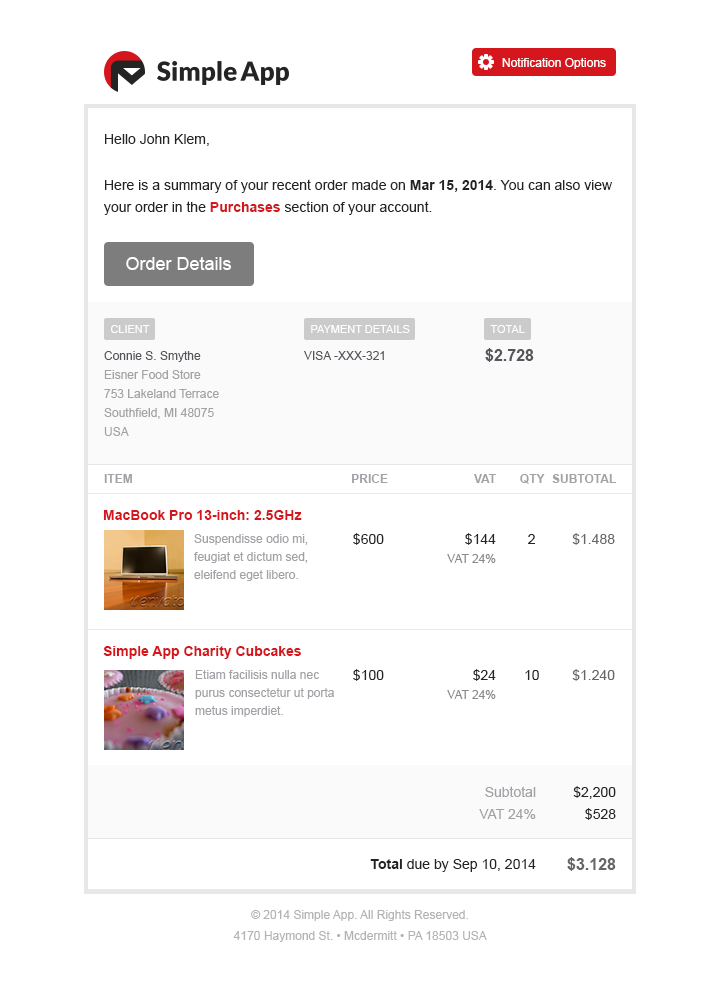
<style>
.page{position:relative;width:720px;height:989px;background:#ffffff}
.page>*{position:absolute;margin:0}
.t1{font:12px "ArialMT";color:#ffffff}
.t2{font:14px/22px "ArialMT";color:#242424}
.t3{font:14px/22px "Arial-BoldMT";color:#242424}
.t4{font:14px/22px "Arial-BoldMT";color:#d5171d}
.t5{font:18px "ArialMT";color:#ffffff}
.t6{font:11px "ArialMT";color:#ffffff;text-transform:uppercase}
.t7{font:12px/19px "ArialMT";color:#a1a2a5}
.t8{font:12px/19px "ArialMT";color:#54565c}
.t9{font:12px "ArialMT";color:#54565c}
.t10{font:16px "Arial-BoldMT";color:#54565c}
.t11{font:12px "Arial-BoldMT";color:#a1a2a5;text-transform:uppercase}
.t12{font:14px "Arial-BoldMT";color:#d5171d}
.t13{font:12px/18px "ArialMT";color:#a1a2a5}
.t14{font:14px "ArialMT";color:#242424}
.t15{font:12px/19px "ArialMT";color:#898989}
.t16{font:14px/19px "ArialMT";color:#242424}
.t17{font:14px "ArialMT";color:#666666}
.t18{font:14px/22px "ArialMT";color:#a1a2a5}
.t19{font:16px "Arial-BoldMT";color:#666666}
.t20{font:14px "Arial-BoldMT";color:#242424}
.t21{font:12px/21px "ArialMT";color:#b3b3b3}
</style>
<div class="page">
<p class="t1" style="left:502px;top:58px;width:104px;height:11px">Notification Options</p>
<p class="t2" style="left:103px;top:134px;width:509px;height:81px">Hello John Klem,<br><br>Here is a summary of your recent order made on <span class="t3">Mar 15, 2014</span>. You can also view your order in the <span class="t4">Purchases </span>section of your account.</p>
<p class="t5" style="left:126px;top:257px;width:105px;height:13px">Order Details</p>
<p class="t6" style="left:111px;top:325px;width:39px;height:8px">client</p>
<p class="t6" style="left:311px;top:325px;width:99px;height:8px">Payment details</p>
<p class="t6" style="left:490px;top:325px;width:35px;height:8px">Total</p>
<p class="t7" style="left:104px;top:351px;width:115px;height:85px"><span class="t8">Connie S. Smythe<br></span>Eisner Food Store<br>753 Lakeland Terrace<br>Southfield, MI 48075<br>USA</p>
<p class="t9" style="left:304px;top:351px;width:80px;height:9px">VISA -XXX-321</p>
<p class="t10" style="left:485px;top:348px;width:49px;height:14px">$2.728</p>
<p class="t11" style="left:104px;top:474px;width:28px;height:9px">Item</p>
<p class="t11" style="left:352px;top:474px;width:36px;height:9px">Price</p>
<p class="t11" style="left:474px;top:474px;width:22px;height:9px">VAT</p>
<p class="t11" style="left:520px;top:474px;width:25px;height:10px">qty</p>
<p class="t11" style="left:552px;top:474px;width:65px;height:9px">Subtotal</p>
<p class="t12" style="left:103px;top:510px;width:199px;height:10px">MacBook Pro 13-inch: 2.5GHz</p>
<p class="t13" style="left:194px;top:534px;width:114px;height:47px">Suspendisse odio mi, feugiat et dictum sed, eleifend eget libero.</p>
<p class="t14" style="left:353px;top:533px;width:31px;height:12px">$600</p>
<p class="t15" style="left:447px;top:533px;width:49px;height:30px;text-align:right"><span class="t16">$144<br></span>VAT 24%</p>
<p class="t14" style="left:528px;top:534px;width:7px;height:10px">2</p>
<p class="t17" style="left:572px;top:533px;width:43px;height:12px">$1.488</p>
<p class="t12" style="left:103px;top:646px;width:198px;height:13px">Simple App Charity Cubcakes</p>
<p class="t13" style="left:195px;top:670px;width:139px;height:47px">Etiam facilisis nulla nec purus consectetur ut porta metus imperdiet.</p>
<p class="t14" style="left:353px;top:669px;width:31px;height:12px">$100</p>
<p class="t15" style="left:447px;top:669px;width:49px;height:30px;text-align:right"><span class="t16">$24<br></span>VAT 24%</p>
<p class="t14" style="left:525px;top:670px;width:14px;height:10px">10</p>
<p class="t17" style="left:572px;top:669px;width:43px;height:12px">$1.240</p>
<p class="t18" style="left:479px;top:786px;width:57px;height:33px;text-align:right">Subtotal<br>VAT 24%</p>
<p class="t2" style="left:573px;top:786px;width:43px;height:34px;text-align:right">$2,200<br>$528</p>
<p class="t19" style="left:567px;top:857px;width:49px;height:14px">$3.128</p>
<p class="t14" style="left:370px;top:859px;width:166px;height:13px"><span class="t20">Total </span>due by Sep 10, 2014</p>
<p class="t21" style="left:233px;top:910px;width:254px;height:32px;text-align:center">© 2014 Simple App. All Rights Reserved.<br>4170 Haymond St. • Mcdermitt • PA 18503 USA</p>
</div>
